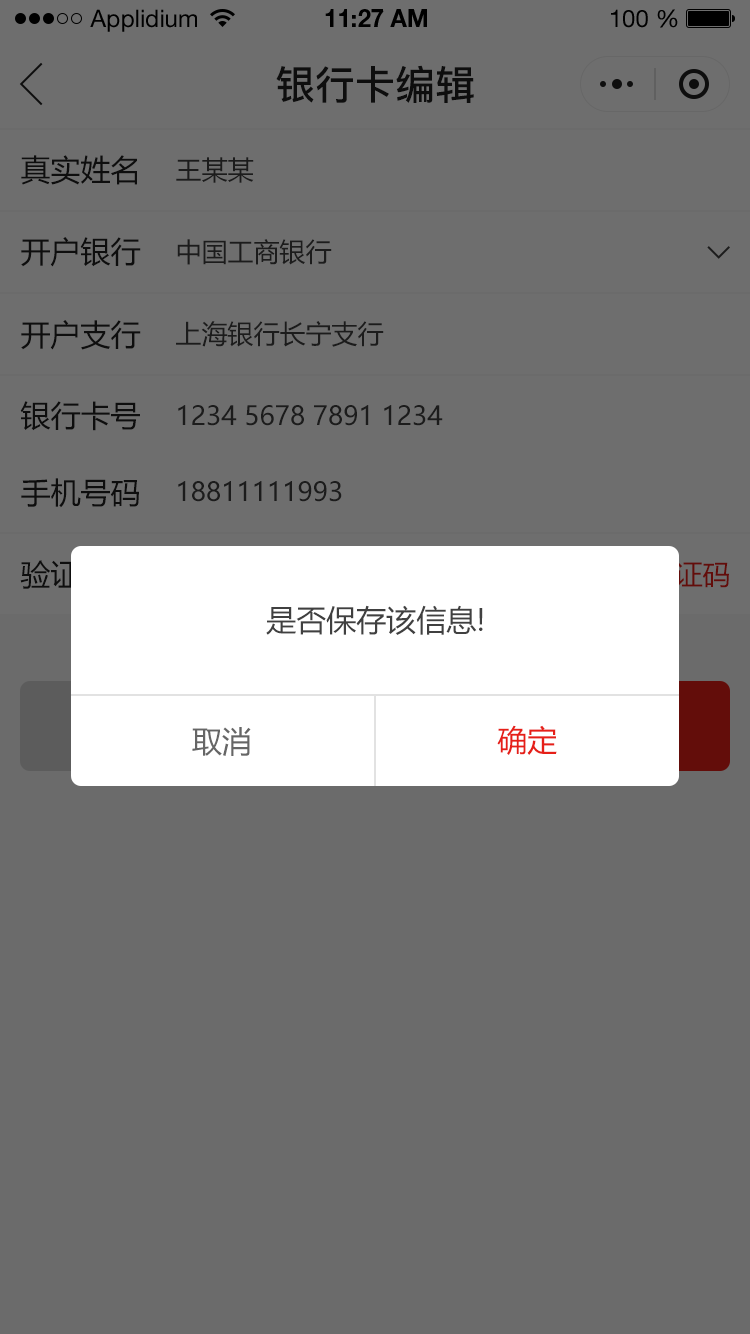
<style>
.page{position:relative;width:750px;height:1334px;background:#6b6b6b}
.page>*{position:absolute;margin:0}
.t1{font:24px "HelveticaNeueLTStd-Roman";color:#000000}
.t2{font:24px "HelveticaNeueLTStd-Bd";color:#000000}
.t3{font:40px "PingFang-SC-Bold";color:#202020;text-transform:uppercase}
.t4{font:30px "MicrosoftYaHei";color:#202020;text-transform:uppercase}
.t5{font:26px "MicrosoftYaHei";color:#1c1c1c;text-transform:uppercase}
.t6{font:30px "MicrosoftYaHei";color:#404040;text-transform:uppercase}
.t7{font:30px "MicrosoftYaHei";color:#e61f18;text-transform:uppercase}
.t8{font:30px "MicrosoftYaHei";color:#666666;text-transform:uppercase}
</style>
<div class="page">
<p class="t1" style="left:90px;top:9px;width:107px;height:23px">Applidium</p>
<p class="t2" style="left:325px;top:9px;width:102px;height:18px">11:27 AM</p>
<p class="t1" style="left:611px;top:9px;width:67px;height:19px">100 %</p>
<p class="t3" style="left:276px;top:65px;width:198px;height:38px">银行卡编辑</p>
<p class="t4" style="left:21px;top:155px;width:116px;height:30px">真实姓名</p>
<p class="t5" style="left:176px;top:157px;width:78px;height:26px">王某某</p>
<p class="t4" style="left:21px;top:237px;width:120px;height:30px">开户银行</p>
<p class="t5" style="left:177px;top:239px;width:155px;height:26px">中国工商银行</p>
<p class="t4" style="left:21px;top:320px;width:120px;height:30px">开户支行</p>
<p class="t5" style="left:176px;top:321px;width:208px;height:26px">上海银行长宁支行</p>
<p class="t4" style="left:20px;top:401px;width:120px;height:30px">银行卡号</p>
<p class="t5" style="left:178px;top:405px;width:265px;height:21px">1234 5678 7891 1234</p>
<p class="t4" style="left:21px;top:478px;width:118px;height:30px">手机号码</p>
<p class="t5" style="left:178px;top:481px;width:164px;height:21px">18811111993</p>
<p class="t6" style="left:266px;top:605px;width:217px;height:30px">是否保存该信息!</p>
<p class="t7" style="left:497px;top:725px;width:60px;height:30px">确定</p>
<p class="t8" style="left:192px;top:727px;width:59px;height:29px">取消</p>
</div>
